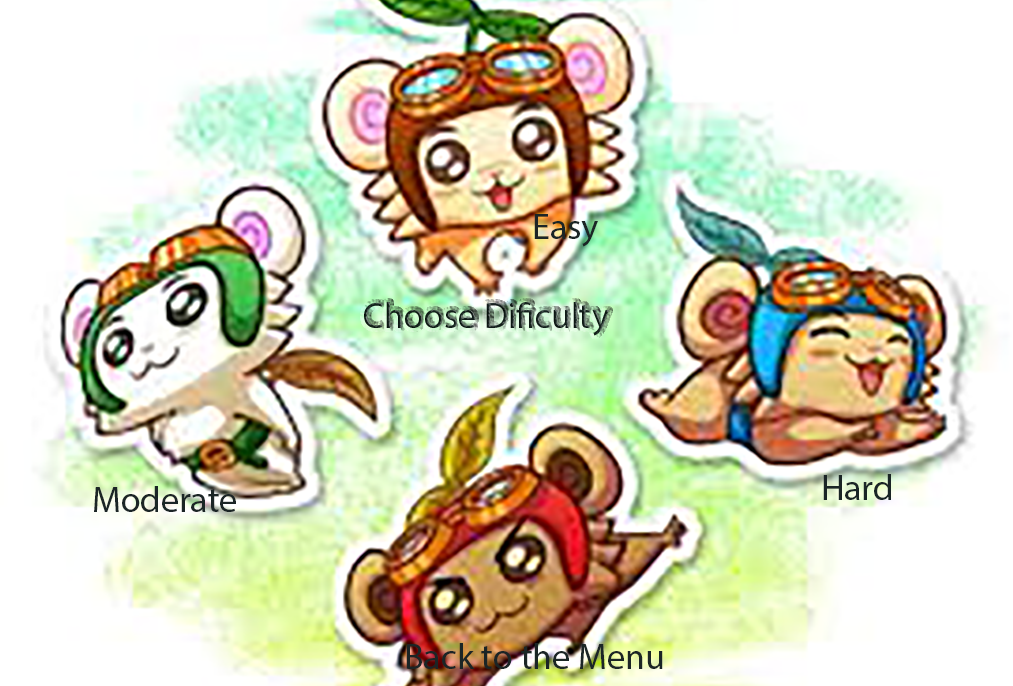
<style>
.page{position:relative;width:1013px;height:686px;background:#ffffff}
.page>*{position:absolute;margin:0}
.t1{font:36px "MyriadPro-Regular";color:#1b2526}
</style>
<div class="page">
<p class="t1" style="left:534px;top:214px;width:64px;height:33px">Easy</p>
<p class="t1" style="left:94px;top:486px;width:142px;height:26px">Moderate</p>
<p class="t1" style="left:823px;top:474px;width:68px;height:26px">Hard</p>
<p class="t1" style="left:406px;top:643px;width:257px;height:26px">Back to the Menu</p>
</div>
